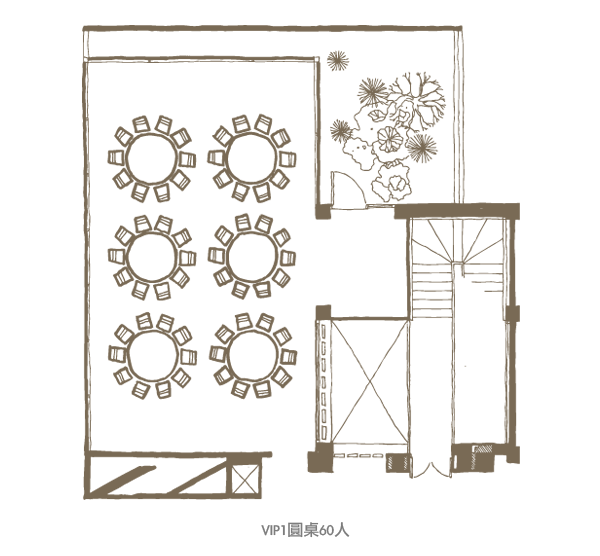
<style>
.page{position:relative;width:600px;height:556px;background:#ffffff}
.page>*{position:absolute;margin:0}
.t1{font:16px "LiGothicMed";color:#7d7d7d}
</style>
<div class="page">
<p class="t1" style="left:261px;top:522px;width:89px;height:16px">VIP1圓桌60人</p>
</div>
